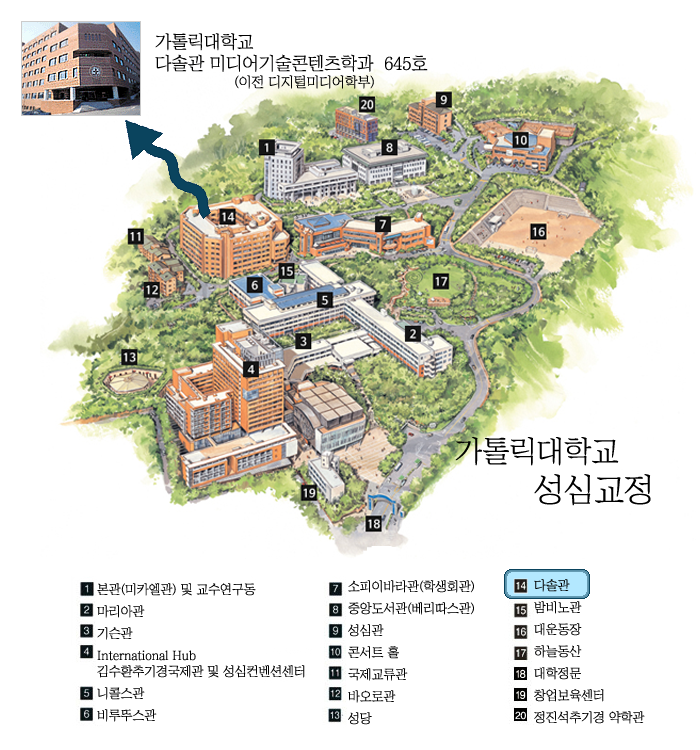
<style>
.page{position:relative;width:700px;height:750px;background:#ffffff}
.page>*{position:absolute;margin:0}
.t1{font:18px "ChosunilboNM";color:#000000}
.t2{font:14px "ChosunilboNM";color:#000000}
.t3{font:30px "ChosunilboNM";color:#000000}
.t4{font:33px "ChosunilboNM";color:#000000}
.t5{font:13px/22px "ChosunilboNM";color:#000000}
.t6{font:13px/16px "ChosunilboNM";color:#000000}
</style>
<div class="page">
<p class="t1" style="left:155px;top:33px;width:273px;height:39px">가톨릭대학교<br>다솔관 미디어기술콘텐츠학과  645호</p>
<p class="t2" style="left:235px;top:75px;width:139px;height:14px">(이전 디지털미디어학부)</p>
<p class="t3" style="left:455px;top:437px;width:196px;height:69px">가톨릭대학교<br><span class="t4">        성심교정</span></p>
<p class="t5" style="left:348px;top:580px;width:126px;height:145px">소피이바라관(학생회관)<br>중앙도서관(베리따스관)<br>성심관<br>콘서트 홀<br>국제교류관<br>바오로관<br>성당</p>
<p class="t5" style="left:534px;top:579px;width:111px;height:145px">다솔관<br>밤비노관<br>대운동장<br>하늘동산<br>대학정문<br>창업보육센터<br>정진석추기경 약학관</p>
<p class="t5" style="left:97px;top:583px;width:208px;height:139px">본관(미카엘관) 및 교수연구동<br>마리아관<br>기슨관<br>International Hub<br><span class="t6">김수환추기경국제관 및 성심컨벤션센터<br></span>니콜스관<br>비루뚜스관</p>
</div>
